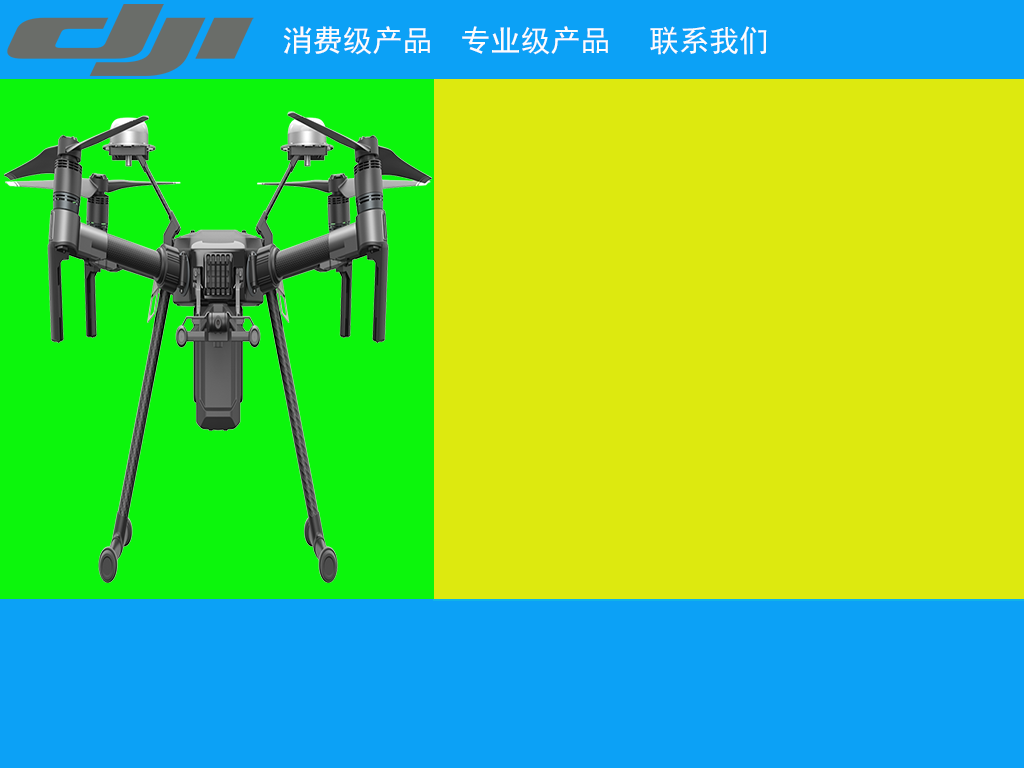
<style>
.page{position:relative;width:1024px;height:768px;background:#dde90f}
.page>*{position:absolute;margin:0}
.t1{font:30px "SimHei";color:#fefcfc}
</style>
<div class="page">
<p class="t1" style="left:283px;top:26px;width:147px;height:29px">消费级产品</p>
<p class="t1" style="left:462px;top:26px;width:146px;height:29px">专业级产品</p>
<p class="t1" style="left:650px;top:26px;width:117px;height:29px">联系我们</p>
</div>
